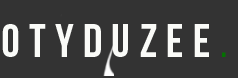
<style>
.page{position:relative;width:238px;height:78px;background:#333333}
.page>*{position:absolute;margin:0}
.t1{font:47px "BebasNeueBold";letter-spacing:0.2em;color:#fafbf8}
.t2{font:47px "BebasNeueRegular";letter-spacing:0.2em;color:#037200}
</style>
<div class="page">
<p class="t1" style="left:2px;top:24px;width:224px;height:33px">otyduzeE<span class="t2">.</span></p>
</div>
